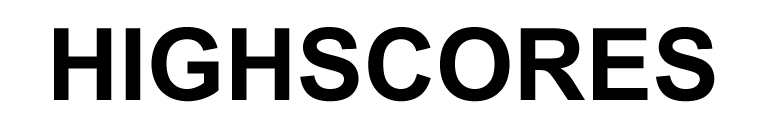
<style>
.page{position:relative;width:768px;height:128px;background:#ffffff}
.page>*{position:absolute;margin:0}
.t1{font:100px "Arial-BoldMT";color:#000000}
</style>
<div class="page">
<p class="t1" style="left:54px;top:27px;width:661px;height:75px">HIGHSCORES</p>
</div>
